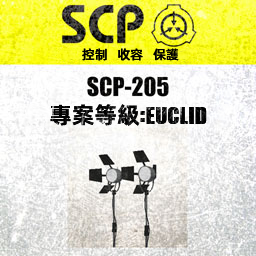
<style>
.page{position:relative;width:256px;height:256px}
.page>*{position:absolute;margin:0}
.t1{font:13px "AlibabaPuHuiTiM";color:#000000}
.t2{font:26px "URWImpactW01-Bold";letter-spacing:0.02em;color:#000000}
.t3{font:23px "AlibabaPuHuiTiB";color:#000000}
.t4{font:31px "URWImpactW01-Bold";letter-spacing:0.02em;color:#000000}
</style>
<div class="page">
<p class="t1" style="left:82px;top:48px;width:97px;height:13px">控制   收容   保護</p>
<p class="t2" style="left:50px;top:104px;width:157px;height:22px"><span class="t3">專案等級</span><span class="t4">:</span>EUCLID</p>
</div>
